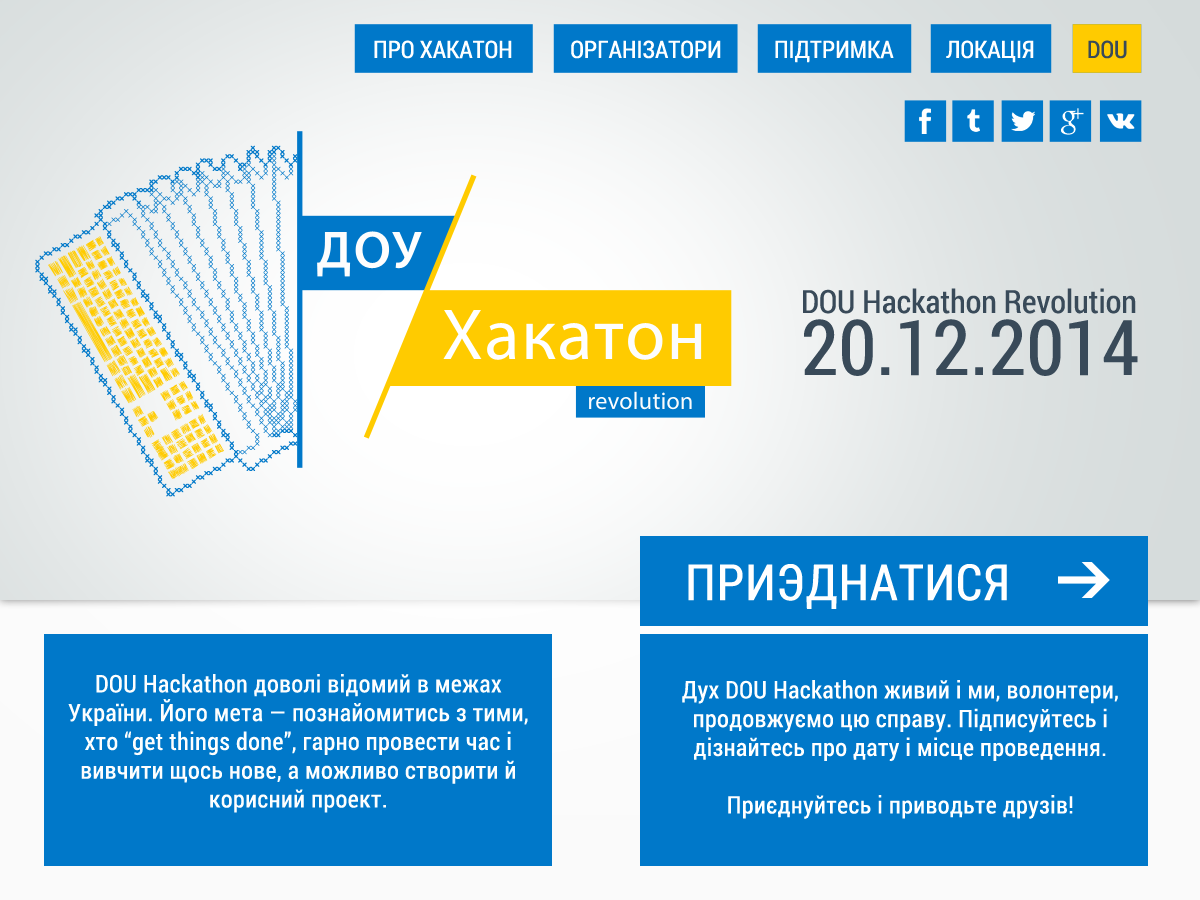
<style>
.page{position:relative;width:1200px;height:900px;background:#0078c9}
.page>*{position:absolute;margin:0}
.t1{font:24px "RobotoCondensed-Regular";color:#ffffff;text-transform:uppercase}
.t2{font:24px "RobotoCondensed-Regular";color:#394a59;text-transform:uppercase}
.t3{font:32px "RobotoCondensed-Regular";color:#394a59}
.t4{font:77px/62px "RobotoCondensed-Regular";color:#394a59}
.t5{font:50px "RobotoCondensed-Regular";letter-spacing:0.02em;color:#ffffff;text-transform:uppercase}
.t6{font:24px "RobotoCondensed-Regular";letter-spacing:0.02em;color:#fdfefe}
.t7{font:24px "RobotoCondensed-Regular";letter-spacing:0.02em;color:#ffffff}
</style>
<div class="page">
<p class="t1" style="left:374px;top:40px;width:753px;height:23px">про хакатон           організатори          підтримка          локація          <span class="t2">DOU</span></p>
<p class="t3" style="left:803px;top:288px;width:335px;height:88px">DOU Hackathon Revolution<br><span class="t4">20.12.2014</span></p>
<p class="t5" style="left:688px;top:564px;width:319px;height:45px">Приэднатися</p>
<p class="t6" style="left:68px;top:674px;width:460px;height:139px;text-align:center">DOU Hackathon доволі відомий в межах України. Його мета — познайомитись з тими, хто “get things done”, гарно провести час і вивчити щось нове, а можливо створити й корисний проект.</p>
<p class="t7" style="left:682px;top:680px;width:436px;height:139px;text-align:center">Дух DOU Hackathon живий і ми, волонтери, продовжуємо цю справу. Підписуйтесь і дізнайтесь про дату і місце проведення.<br><br>Приєднуйтесь і приводьте друзів!</p>
</div>
